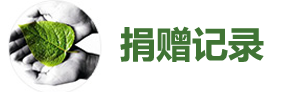
<style>
.page{position:relative;width:288px;height:92px;background:#ffffff}
.page>*{position:absolute;margin:0}
.t1{font:36px "MicrosoftYaHei-Bold";color:#407434}
</style>
<div class="page">
<p class="t1" style="left:120px;top:26px;width:144px;height:37px">捐赠记录</p>
</div>
